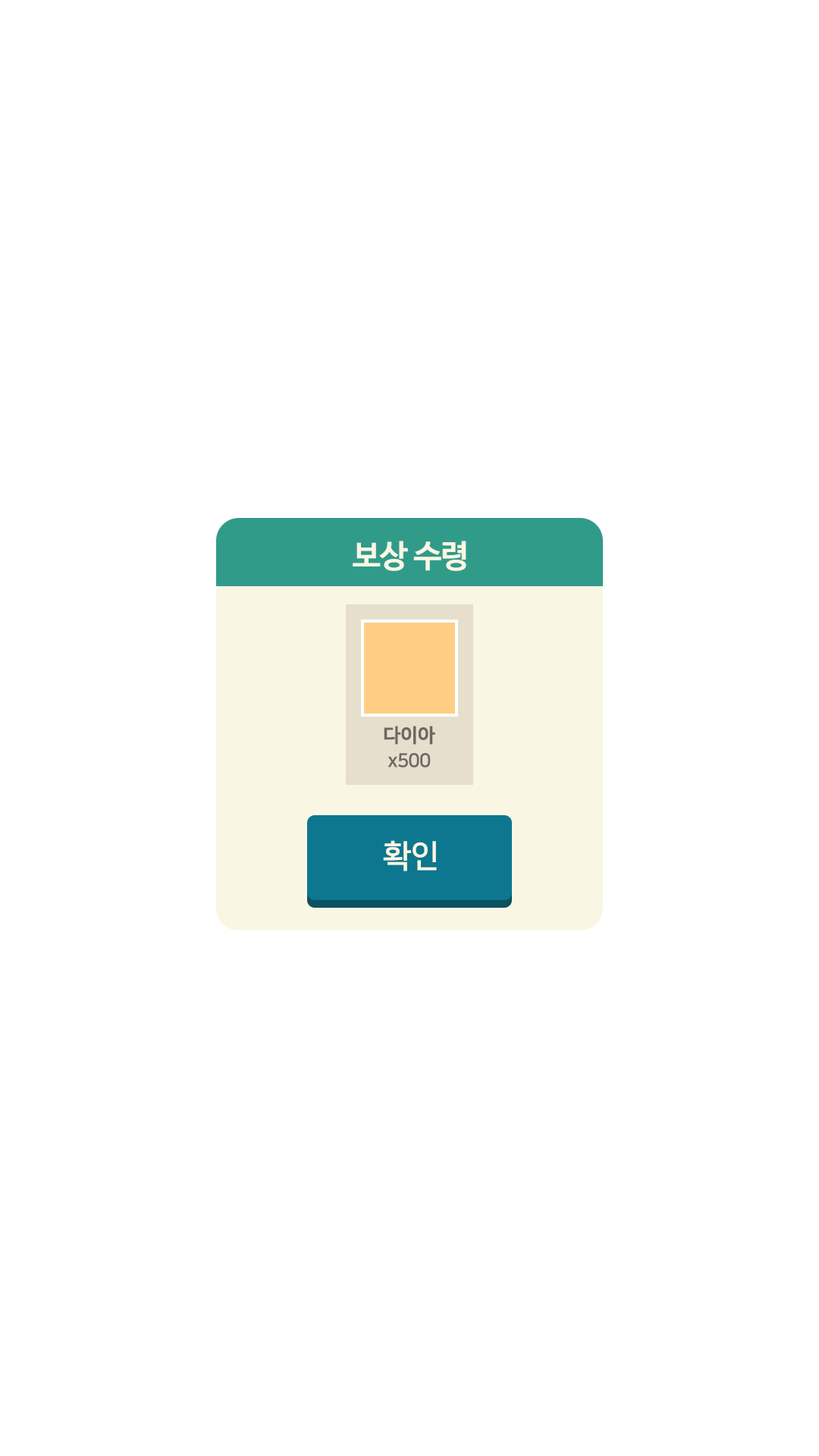
<style>
.page{position:relative;width:819px;height:1456px;background:#ffffff}
.page>*{position:absolute;margin:0}
.t1{font:31.6px "NanumBarunGothicBold";letter-spacing:-0.025em;color:#faf6e4}
.t2{font:19px/25.3px "NanumSquareOTFB";letter-spacing:-0.025em;color:#6e6664}
.t3{font:19px/25.3px "NanumSquareOTFB";letter-spacing:-0.025em;color:#6e6664;font-weight:bold}
.t4{font:31.6px "NanumSquareOTFB";letter-spacing:-0.025em;color:#faf6e4}
</style>
<div class="page">
<p class="t1" style="left:353px;top:541px;width:113px;height:30px">보상 수령</p>
<p class="t2" style="left:384px;top:726px;width:51px;height:41px;text-align:center"><span class="t3">다이아<br></span>x500</p>
<p class="t4" style="left:383px;top:840px;width:54px;height:31px">확인</p>
</div>
